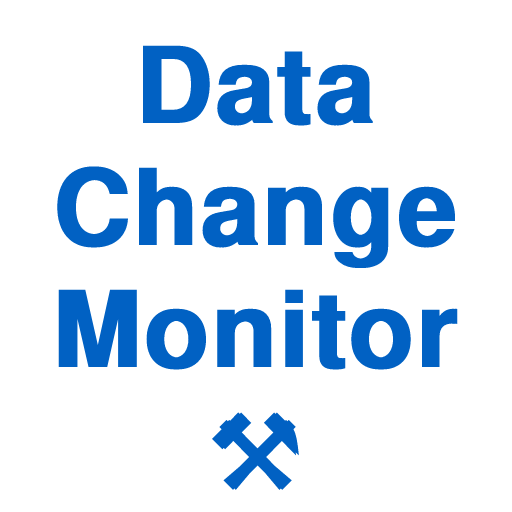
<style>
.page{position:relative;width:512px;height:512px;background:#ffffff}
.page>*{position:absolute;margin:0}
.t1{font:106px "NimbusSanL-Bol";color:#0161c3;font-weight:bold}
.t2{font:1px "NimbusSanL-Bol";color:#ffffff;font-weight:bold}
.t3{font:106px "DejaVuSans";color:#0161c3;font-weight:bold}
</style>
<div class="page">
<p class="t1" style="left:57px;top:45px;width:401px;height:445px;text-align:center"><span class="t2"><br></span>Data<br>Change<br>Monitor<br><span class="t3">⚒️</span></p>
</div>
